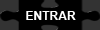
<style>
.page{position:relative;width:100px;height:30px;background:#000000}
.page>*{position:absolute;margin:0}
.t1{font:12.2px "Arial-BoldMT";color:#ffffff}
</style>
<div class="page">
<p class="t1" style="left:26px;top:11px;width:50px;height:9px">ENTRAR</p>
</div>
